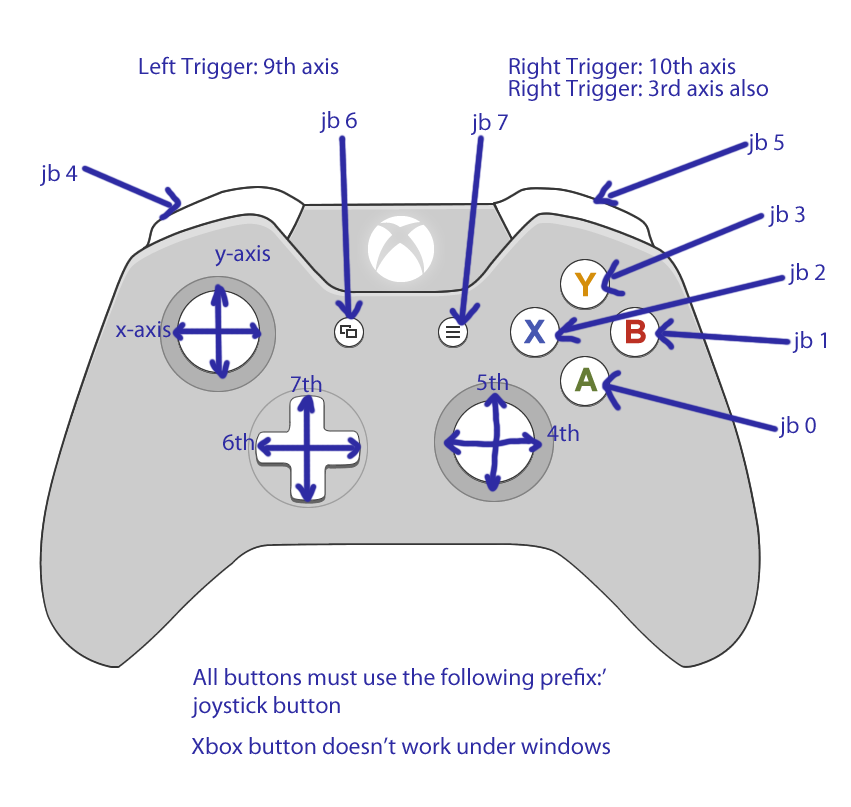
<style>
.page{position:relative;width:851px;height:807px;background:#ffffff}
.page>*{position:absolute;margin:0}
.t1{font:23.9px "MyriadPro-Regular";color:#2e2ba3}
</style>
<div class="page">
<p class="t1" style="left:139px;top:56px;width:200px;height:23px">Left Trigger: 9th axis</p>
<p class="t1" style="left:509px;top:57px;width:227px;height:22px">Right Trigger: 10th axis</p>
<p class="t1" style="left:509px;top:79px;width:259px;height:22px">Right Trigger: 3rd axis also</p>
<p class="t1" style="left:319px;top:111px;width:38px;height:22px">jb 6</p>
<p class="t1" style="left:471px;top:113px;width:37px;height:22px">jb 7</p>
<p class="t1" style="left:747px;top:133px;width:37px;height:22px">jb 5</p>
<p class="t1" style="left:40px;top:164px;width:38px;height:22px">jb 4</p>
<p class="t1" style="left:768px;top:205px;width:37px;height:22px">jb 3</p>
<p class="t1" style="left:215px;top:245px;width:55px;height:22px">y-axis</p>
<p class="t1" style="left:788px;top:263px;width:37px;height:22px">jb 2</p>
<p class="t1" style="left:115px;top:321px;width:56px;height:17px">x-axis</p>
<p class="t1" style="left:792px;top:331px;width:34px;height:22px">jb 1</p>
<p class="t1" style="left:291px;top:375px;width:31px;height:18px">7th</p>
<p class="t1" style="left:477px;top:373px;width:31px;height:18px">5th</p>
<p class="t1" style="left:547px;top:424px;width:32px;height:18px">4th</p>
<p class="t1" style="left:779px;top:416px;width:37px;height:22px">jb 0</p>
<p class="t1" style="left:223px;top:433px;width:31px;height:18px">6th</p>
<p class="t1" style="left:191px;top:667px;width:415px;height:52px">All buttons must use the following prefix:’<br>joystick button</p>
<p class="t1" style="left:191px;top:737px;width:419px;height:18px">Xbox button doesn’t work under windows</p>
</div>
